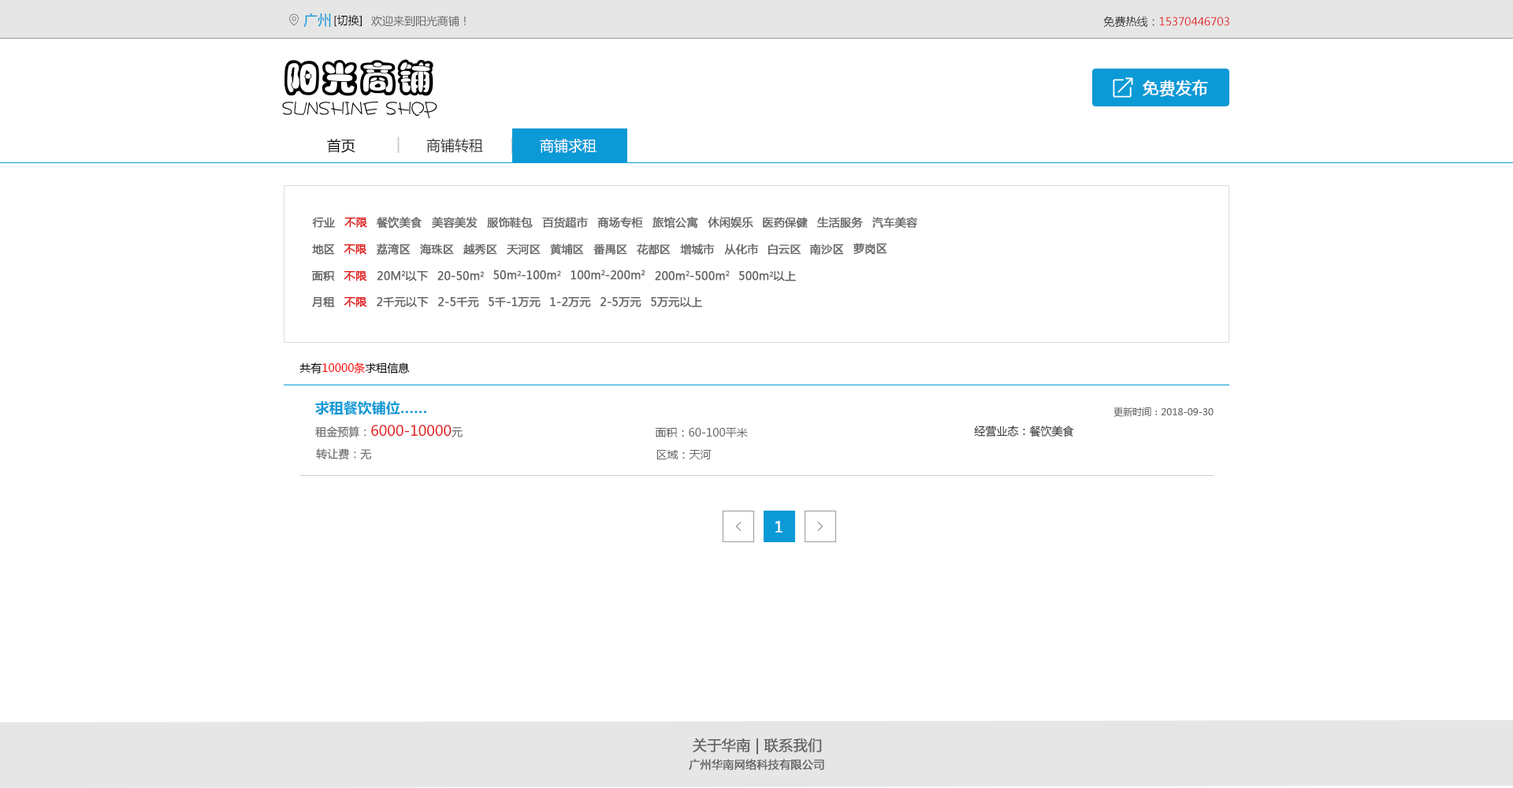
<style>
.page{position:relative;width:1513px;height:788px;background:#ffffff}
.page>*{position:absolute;margin:0}
.t1{font:14.2px "MicrosoftYaHei";color:#0b9ad6}
.t2{font:11px "MicrosoftYaHei";color:#000000}
.t3{font:11px "MicrosoftYaHei";color:#666666}
.t4{font:11px "MicrosoftYaHei";color:#e22222}
.t5{font:11px "MicrosoftYaHei";color:#333333}
.t6{font:16.2px "MicrosoftYaHei";color:#ffffff;text-transform:uppercase;font-weight:bold}
.t7{font:14.2px "MicrosoftYaHei";color:#ccc8c8}
.t8{font:14.5px "MicrosoftYaHei";color:#ccc8c8}
.t9{font:14.5px "MicrosoftYaHei";color:#333232}
.t10{font:14.2px "MicrosoftYaHei";color:#000000}
.t11{font:14.5px "MicrosoftYaHei";color:#fefefe}
.t12{font:11px "MicrosoftYaHei";color:#666666;text-transform:uppercase;font-weight:bold}
.t13{font:11px "MicrosoftYaHei";color:#e22222;text-transform:uppercase;font-weight:bold}
.t14{font:11.2px "MicrosoftYaHei";color:#666666;text-transform:uppercase;font-weight:bold}
.t15{font:10.8px "MicrosoftYaHei";color:#666666;text-transform:uppercase;font-weight:bold}
.t16{font:10.9px "MicrosoftYaHei";color:#666666;text-transform:uppercase;font-weight:bold}
.t17{font:11px "MicrosoftYaHei";color:#666666;font-weight:bold}
.t18{font:11px "MicrosoftYaHei";color:#ff0000}
.t19{font:14.3px "MicrosoftYaHei-Bold";color:#0b9ad6}
.t20{font:9.5px "MicrosoftYaHei";color:#666666}
.t21{font:14.3px "MicrosoftYaHei";color:#e22222}
.t22{font:11.1px "MicrosoftYaHei";color:#666666}
.t23{font:14.2px "MicrosoftYaHei";color:#ffffff;text-transform:uppercase;font-weight:bold}
.t24{font:14.3px "MicrosoftYaHei";color:#666666;text-transform:uppercase;font-weight:bold}
.t25{font:11.1px "MicrosoftYaHei";color:#666666;text-transform:uppercase;font-weight:bold}
.t26{font:9.5px "MicrosoftYaHei";color:#666666;text-transform:uppercase;font-weight:bold}
</style>
<div class="page">
<p class="t1" style="left:303px;top:13px;width:28px;height:15px">广州</p>
<p class="t2" style="left:334px;top:15px;width:28px;height:12px">[切换]</p>
<p class="t3" style="left:371px;top:15px;width:95px;height:12px">欢迎来到阳光商铺！</p>
<p class="t4" style="left:1103px;top:16px;width:126px;height:12px"><span class="t5">免费热线：</span>15370446703</p>
<p class="t6" style="left:1143px;top:80px;width:65px;height:17px">免费发布</p>
<p class="t7" style="left:397px;top:137px;width:3px;height:16px">|</p>
<p class="t8" style="left:397px;top:137px;width:3px;height:16px">|</p>
<p class="t9" style="left:426px;top:138px;width:57px;height:15px">商铺转租</p>
<p class="t8" style="left:511px;top:138px;width:2px;height:16px">|</p>
<p class="t10" style="left:327px;top:139px;width:28px;height:14px">首页</p>
<p class="t11" style="left:540px;top:139px;width:57px;height:14px">商铺求租</p>
<p class="t12" style="left:312px;top:218px;width:23px;height:10px">行业</p>
<p class="t13" style="left:344px;top:218px;width:23px;height:10px">不限</p>
<p class="t12" style="left:376px;top:217px;width:46px;height:12px">餐饮美食</p>
<p class="t12" style="left:432px;top:217px;width:46px;height:12px">美容美发</p>
<p class="t12" style="left:487px;top:217px;width:46px;height:12px">服饰鞋包</p>
<p class="t12" style="left:542px;top:217px;width:46px;height:12px">百货超市</p>
<p class="t12" style="left:597px;top:217px;width:46px;height:12px">商场专柜</p>
<p class="t14" style="left:653px;top:217px;width:45px;height:12px">旅馆公寓</p>
<p class="t14" style="left:708px;top:216px;width:45px;height:13px">休闲娱乐</p>
<p class="t15" style="left:763px;top:217px;width:45px;height:12px">医药保健</p>
<p class="t16" style="left:816px;top:217px;width:47px;height:12px">生活服务</p>
<p class="t16" style="left:872px;top:217px;width:45px;height:12px">汽车美容</p>
<p class="t12" style="left:312px;top:244px;width:23px;height:11px">地区</p>
<p class="t13" style="left:344px;top:244px;width:23px;height:11px">不限</p>
<p class="t12" style="left:377px;top:244px;width:34px;height:11px">荔湾区</p>
<p class="t15" style="left:420px;top:244px;width:34px;height:11px">海珠区</p>
<p class="t15" style="left:463px;top:244px;width:34px;height:11px">越秀区</p>
<p class="t15" style="left:507px;top:244px;width:34px;height:11px">天河区</p>
<p class="t15" style="left:550px;top:244px;width:34px;height:11px">黄埔区</p>
<p class="t15" style="left:593px;top:244px;width:34px;height:11px">番禺区</p>
<p class="t15" style="left:637px;top:244px;width:34px;height:11px">花都区</p>
<p class="t15" style="left:680px;top:244px;width:35px;height:11px">增城市</p>
<p class="t15" style="left:724px;top:244px;width:35px;height:11px">从化市</p>
<p class="t15" style="left:768px;top:244px;width:33px;height:11px">白云区</p>
<p class="t12" style="left:809px;top:244px;width:35px;height:11px">南沙区</p>
<p class="t12" style="left:853px;top:243px;width:34px;height:12px">萝岗区</p>
<p class="t12" style="left:571px;top:270px;width:74px;height:10px">100<span class="t17">m</span>2-200<span class="t17">m</span>2</p>
<p class="t12" style="left:312px;top:271px;width:23px;height:10px">面积</p>
<p class="t13" style="left:344px;top:271px;width:23px;height:10px">不限</p>
<p class="t12" style="left:377px;top:270px;width:51px;height:11px">20m<span class="t17">2</span>以下</p>
<p class="t12" style="left:437px;top:271px;width:47px;height:10px">20-50<span class="t17">m</span>2</p>
<p class="t12" style="left:493px;top:270px;width:68px;height:10px">50<span class="t17">m</span>2-100<span class="t17">m</span>2</p>
<p class="t12" style="left:655px;top:270px;width:75px;height:11px">200<span class="t17">m</span>2-500<span class="t17">m</span>2</p>
<p class="t12" style="left:739px;top:271px;width:57px;height:10px">500<span class="t17">m</span>2以上</p>
<p class="t12" style="left:312px;top:297px;width:23px;height:10px">月租</p>
<p class="t13" style="left:344px;top:297px;width:23px;height:10px">不限</p>
<p class="t12" style="left:377px;top:297px;width:52px;height:10px">2千元以下</p>
<p class="t12" style="left:437px;top:297px;width:42px;height:10px">2-5千元</p>
<p class="t12" style="left:489px;top:297px;width:52px;height:10px">5千-1万元</p>
<p class="t12" style="left:550px;top:297px;width:41px;height:10px">1-2万元</p>
<p class="t12" style="left:600px;top:297px;width:41px;height:10px">2-5万元</p>
<p class="t12" style="left:651px;top:297px;width:51px;height:10px">5万元以上</p>
<p class="t18" style="left:299px;top:363px;width:111px;height:11px"><span class="t2">共有</span>10000条<span class="t2">求租信息</span></p>
<p class="t19" style="left:315px;top:401px;width:111px;height:14px">求租餐饮铺位……</p>
<p class="t20" style="left:1114px;top:407px;width:100px;height:10px">更新时间：2018-09-30</p>
<p class="t21" style="left:315px;top:425px;width:148px;height:12px"><span class="t22">租金预算：</span>6000-10000<span class="t22">元</span></p>
<p class="t5" style="left:974px;top:426px;width:100px;height:11px">经营业态：餐饮美食</p>
<p class="t3" style="left:655px;top:428px;width:93px;height:9px">面积：60-100平米</p>
<p class="t22" style="left:316px;top:448px;width:56px;height:11px">转让费：无</p>
<p class="t3" style="left:656px;top:450px;width:56px;height:9px">区域：天河</p>
<p class="t23" style="left:775px;top:521px;width:8px;height:12px">1</p>
<p class="t24" style="left:693px;top:738px;width:129px;height:16px">关于华南 | 联系我们</p>
<p class="t25" style="left:689px;top:759px;width:135px;height:12px"><span class="t26"> </span>广州华南网络科技有限公司</p>
</div>
